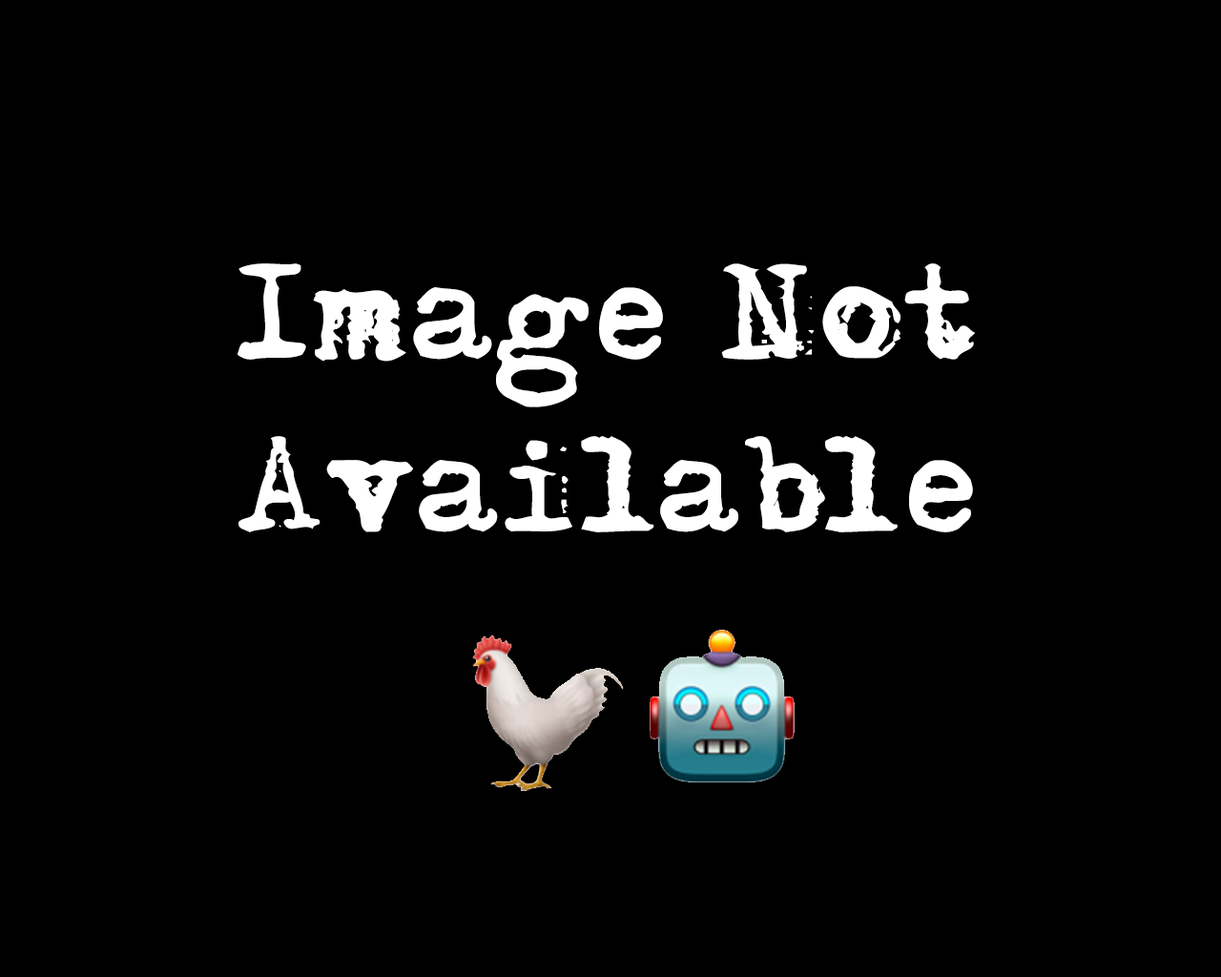
<style>
.page{position:relative;width:1221px;height:977px;background:#000000}
.page>*{position:absolute;margin:0}
.t1{font:119.2px/166.9px "Adler";letter-spacing:0.025em;color:#ffffff}
</style>
<div class="page">
<p class="t1" style="left:237px;top:263px;width:738px;height:269px;text-align:center">Image Not<br>Available</p>
</div>
